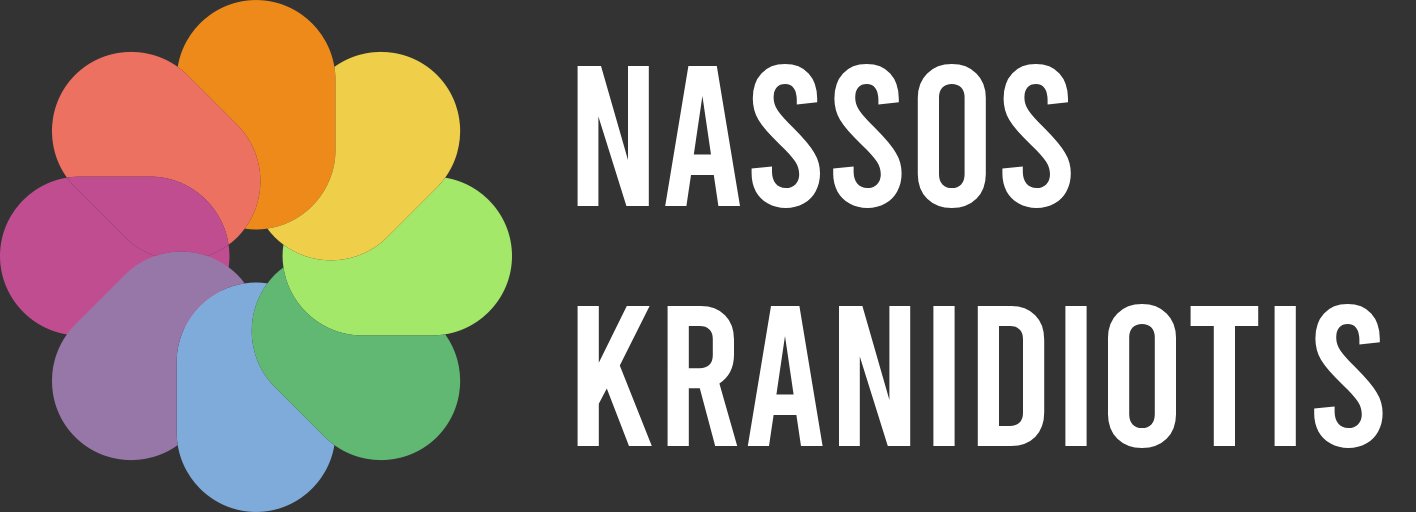
<style>
.page{position:relative;width:1416px;height:512px;background:#333333}
.page>*{position:absolute;margin:0}
.t1{font:200px "Bebas-Regular";color:#ffffff}
</style>
<div class="page">
<p class="t1" style="left:577px;top:64px;width:806px;height:384px">NASSOS<br>KRANIDIOTIS</p>
</div>
